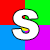
<style>
.page{position:relative;width:50px;height:50px}
.page>*{position:absolute;margin:0}
.t1{font:40px "Arial-Black";color:#ffffff}
</style>
<div class="page">
<p class="t1" style="left:12px;top:9px;width:27px;height:31px">S</p>
</div>
